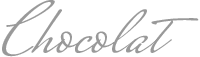
<style>
.page{position:relative;width:200px;height:57px;background:#ffffff}
.page>*{position:absolute;margin:0}
.t1{font:73.9px "MrsSaintDelafield-Regular";color:#999999}
</style>
<div class="page">
<p class="t1" style="left:2px;top:0px;width:197px;height:57px">Chocolat</p>
</div>
